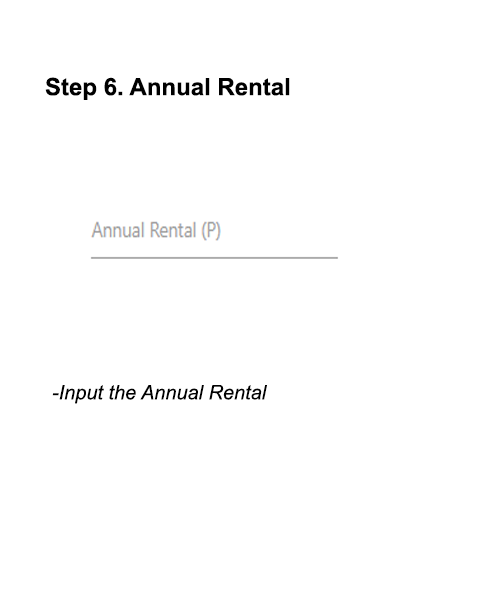
<style>
.page{position:relative;width:500px;height:600px;background:#ffffff}
.page>*{position:absolute;margin:0}
.t1{font:24px "Arial-BoldMT";color:#000000}
.t2{font:20px "Arial-ItalicMT";color:#000000}
</style>
<div class="page">
<p class="t1" style="left:45px;top:77px;width:245px;height:23px">Step 6. Annual Rental</p>
<p class="t2" style="left:52px;top:385px;width:215px;height:19px">-Input the Annual Rental</p>
</div>
